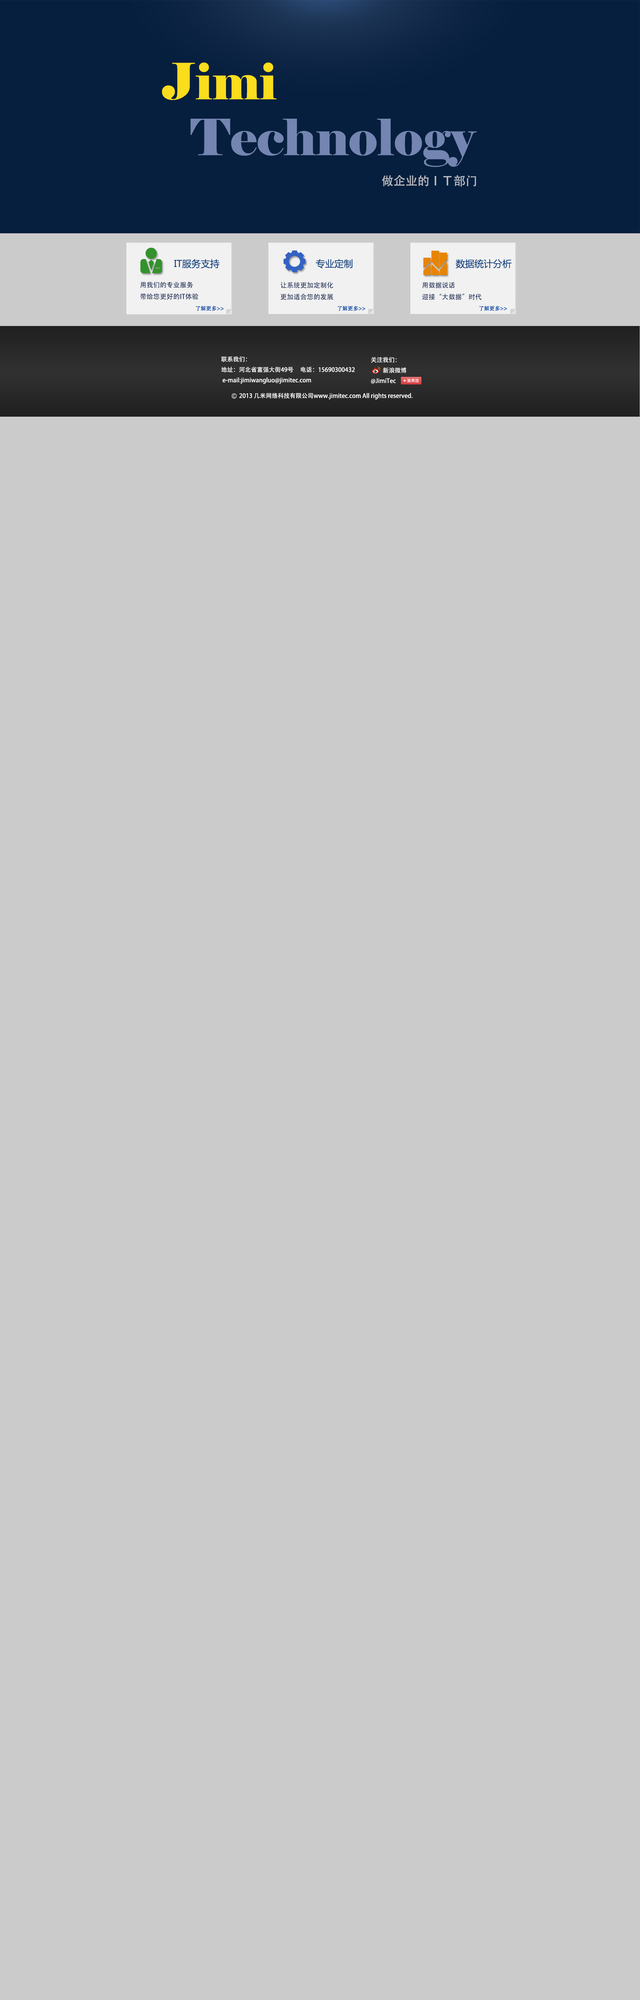
<style>
.page{position:relative;width:640px;height:2000px;background:#cbcbcb}
.page>*{position:absolute;margin:0}
.t1{font:50px "Elephant-Regular";color:#fadd1d}
.t2{font:50px "Elephant-Regular";color:#7385b0}
.t3{font:12px "AdobeHeitiStd-Regular";color:#b7bac0}
.t4{font:6px "AdobeHeitiStd-Regular";color:#ffffff}
</style>
<div class="page">
<p class="t1" style="left:162px;top:62px;width:115px;height:38px">Jimi</p>
<p class="t2" style="left:190px;top:119px;width:287px;height:48px">Technology</p>
<p class="t3" style="left:382px;top:175px;width:94px;height:12px">做企业的ＩＴ部门</p>
<p class="t4" style="left:221px;top:356px;width:134px;height:28px">联系我们：<br>地址：河北省富强大街49号     电话：15690300432     <br> e-mail:jimiwangluo@jimitec.com</p>
<p class="t4" style="left:371px;top:357px;width:35px;height:27px">关注我们：<br> 新浪微博<br>@JimiTec</p>
<p class="t4" style="left:239px;top:393px;width:174px;height:7px">2013 几米网络科技有限公司www.jimitec.com All rights reserved.</p>
</div>
